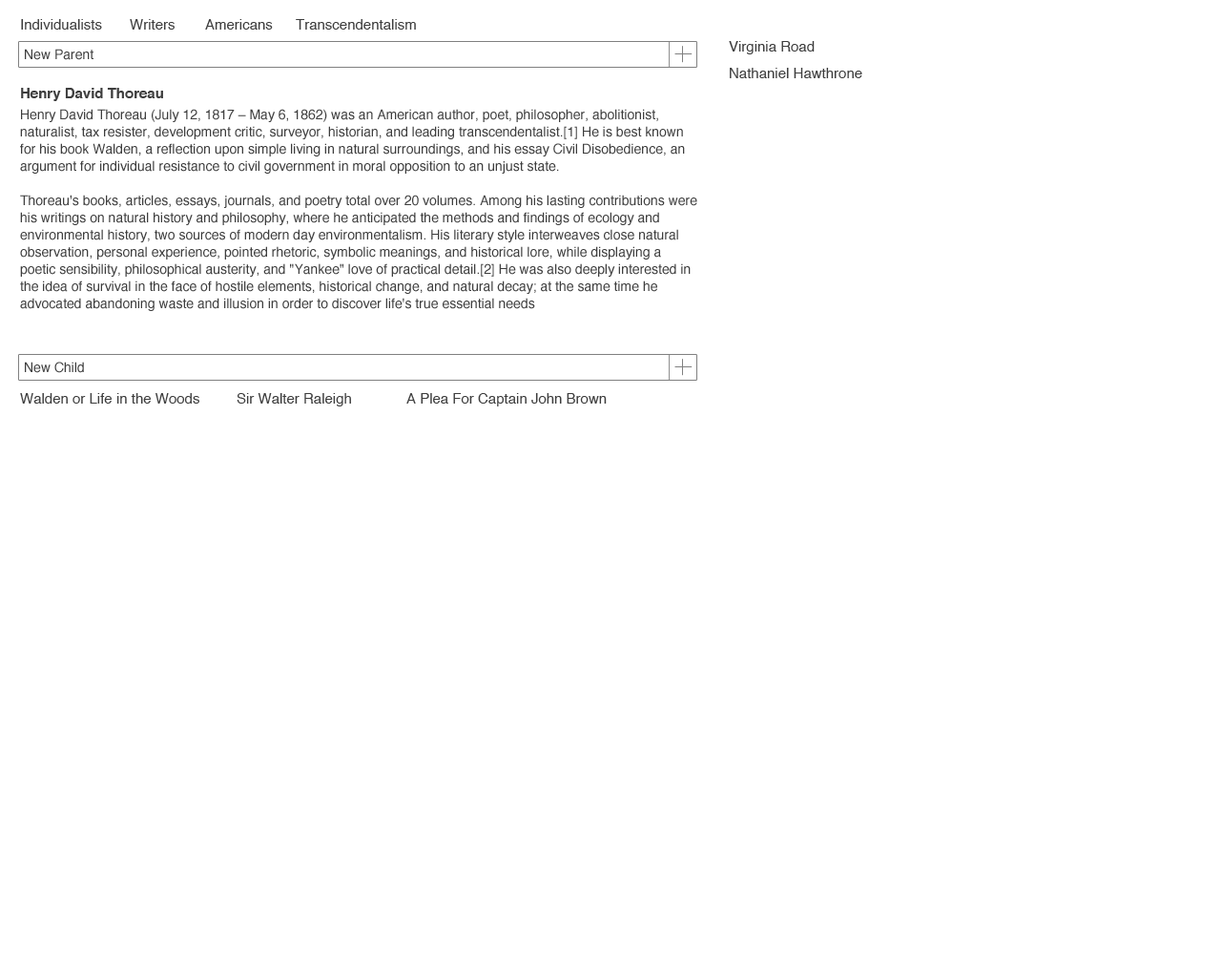
<style>
.page{position:relative;width:1221px;height:977px;background:#ffffff}
.page>*{position:absolute;margin:0}
.t1{font:14.3px "Helvetica";color:#3d3d3d}
.t2{font:13.4px "Helvetica";color:#3d3d3d}
.t3{font:14.3px "Helvetica-Bold";color:#3d3d3d}
.t4{font:13.4px/17.2px "Helvetica";color:#3d3d3d}
</style>
<div class="page">
<p class="t1" style="left:21px;top:19px;width:81px;height:11px">Individualists</p>
<p class="t1" style="left:130px;top:19px;width:45px;height:11px">Writers</p>
<p class="t1" style="left:205px;top:19px;width:68px;height:11px">Americans</p>
<p class="t1" style="left:296px;top:19px;width:120px;height:11px">Transcendentalism</p>
<p class="t1" style="left:729px;top:41px;width:86px;height:13px">Virginia Road</p>
<p class="t2" style="left:25px;top:49px;width:68px;height:11px">New Parent</p>
<p class="t1" style="left:730px;top:68px;width:132px;height:10px">Nathaniel Hawthrone</p>
<p class="t3" style="left:21px;top:88px;width:142px;height:13px">Henry David Thoreau</p>
<p class="t4" style="left:20px;top:109px;width:677px;height:202px">Henry David Thoreau (July 12, 1817 – May 6, 1862) was an American author, poet, philosopher, abolitionist, naturalist, tax resister, development critic, surveyor, historian, and leading transcendentalist.[1] He is best known for his book Walden, a reflection upon simple living in natural surroundings, and his essay Civil Disobedience, an argument for individual resistance to civil government in moral opposition to an unjust state.<br><br>Thoreau's books, articles, essays, journals, and poetry total over 20 volumes. Among his lasting contributions were his writings on natural history and philosophy, where he anticipated the methods and findings of ecology and environmental history, two sources of modern day environmentalism. His literary style interweaves close natural observation, personal experience, pointed rhetoric, symbolic meanings, and historical lore, while displaying a poetic sensibility, philosophical austerity, and "Yankee" love of practical detail.[2] He was also deeply interested in the idea of survival in the face of hostile elements, historical change, and natural decay; at the same time he advocated abandoning waste and illusion in order to discover life's true essential needs</p>
<p class="t2" style="left:25px;top:361px;width:59px;height:12px">New Child</p>
<p class="t1" style="left:20px;top:393px;width:179px;height:10px">Walden or Life in the Woods</p>
<p class="t1" style="left:237px;top:393px;width:114px;height:13px">Sir Walter Raleigh</p>
<p class="t1" style="left:406px;top:393px;width:201px;height:13px">A Plea For Captain John Brown</p>
</div>
